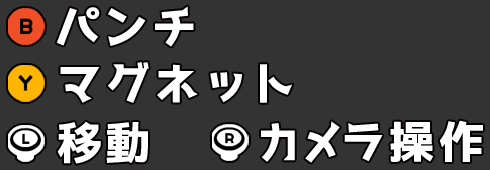
<style>
.page{position:relative;width:490px;height:170px;background:#333333}
.page>*{position:absolute;margin:0}
.t1{font:44.8px "07AkazukinPop";letter-spacing:0.08em;color:#ffffff}
.t2{font:44.8px "07AkazukinPop";letter-spacing:0.12em;color:#ffffff}
.t3{font:44.8px "07AkazukinPop";letter-spacing:-0.02em;color:#ffffff}
.t4{font:44.8px "07AkazukinPop";letter-spacing:-0.08em;color:#ffffff}
.t5{font:44.8px "07AkazukinPop";letter-spacing:0.06em;color:#ffffff}
</style>
<div class="page">
<p class="t1" style="left:56px;top:6px;width:138px;height:41px">パンチ</p>
<p class="t1" style="left:60px;top:62px;width:233px;height:41px">マグネット</p>
<p class="t1" style="left:57px;top:121px;width:91px;height:43px">移動</p>
<p class="t2" style="left:261px;top:120px;width:222px;height:43px"><span class="t3">カ</span><span class="t4">メ</span><span class="t5">ラ</span>操作</p>
</div>
